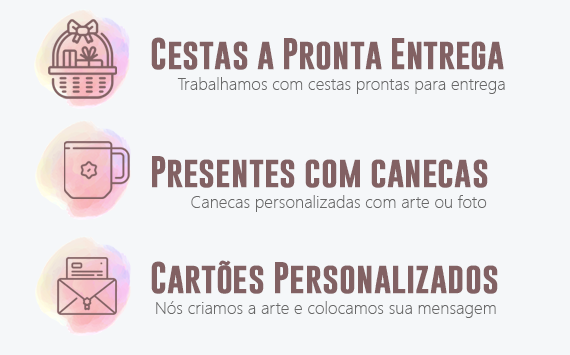
<style>
.page{position:relative;width:570px;height:355px;background:#f5f7f9}
.page>*{position:absolute;margin:0}
.t1{font:32.1px "GoboldBold";color:#826163}
.t2{font:17.1px "SegoeUI-Light";color:#686868}
</style>
<div class="page">
<p class="t1" style="left:151px;top:37px;width:353px;height:33px">Cestas a Pronta Entrega</p>
<p class="t2" style="left:177px;top:77px;width:328px;height:17px">Trabalhamos com cestas prontas para entrega</p>
<p class="t1" style="left:152px;top:156px;width:336px;height:32px">Presentes com canecas</p>
<p class="t2" style="left:191px;top:195px;width:296px;height:17px">Canecas personalizadas com arte ou foto</p>
<p class="t1" style="left:151px;top:260px;width:347px;height:34px">Cartões Personalizados</p>
<p class="t2" style="left:156px;top:301px;width:340px;height:17px">Nós criamos a arte e colocamos sua mensagem</p>
</div>
